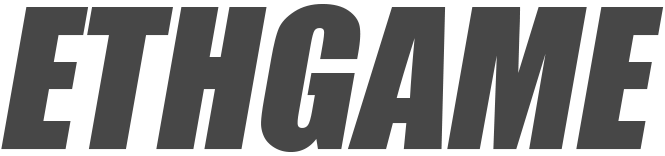
<style>
.page{position:relative;width:665px;height:156px;background:#474747}
.page>*{position:absolute;margin:0}
.t1{font:180px "Impact";color:#474747;font-style:italic}
</style>
<div class="page">
<p class="t1" style="left:1px;top:4px;width:663px;height:148px">ETHGAME</p>
</div>
